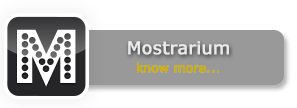
<style>
.page{position:relative;width:297px;height:108px;background:#ffffff}
.page>*{position:absolute;margin:0}
.t1{font:17.4px "Verdana";color:#eaeaea;font-weight:bold}
.t2{font:12px "Verdana";color:#ceae00;font-weight:bold}
</style>
<div class="page">
<p class="t1" style="left:128px;top:41px;width:101px;height:14px">Mostrarium</p>
<p class="t2" style="left:137px;top:62px;width:82px;height:11px">know more...</p>
</div>
